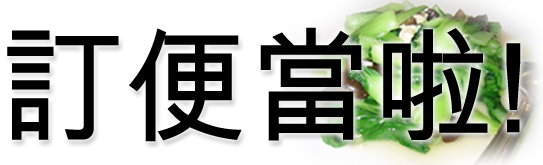
<style>
.page{position:relative;width:543px;height:165px;background:#ffffff}
.page>*{position:absolute;margin:0}
.t1{font:124px "ArialUnicodeMS";color:#000000}
</style>
<div class="page">
<p class="t1" style="left:7px;top:27px;width:514px;height:115px">訂便當啦!</p>
</div>
